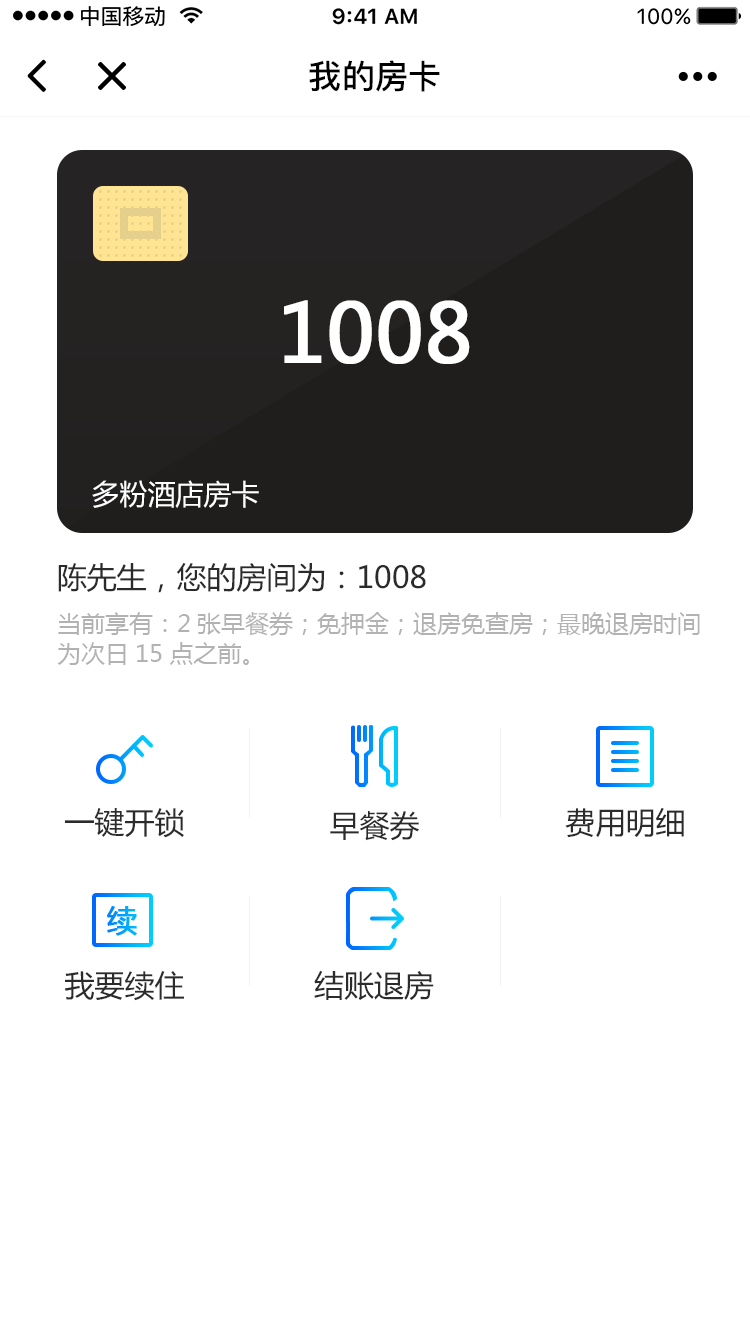
<style>
.page{position:relative;width:750px;height:1334px;background:#ffffff}
.page>*{position:absolute;margin:0}
.t1{font:33.2px "PingFang-SC-Bold";color:#000000}
.t2{font:80px "MicrosoftYaHei";color:#ffffff;font-weight:bold}
.t3{font:28px "MicrosoftYaHei";color:#ffffff}
.t4{font:30px "MicrosoftYaHei";color:#2b2b2b}
.t5{font:24px/30px "MicrosoftYaHei";color:#b2b2b2}
</style>
<div class="page">
<p class="t1" style="left:309px;top:60px;width:131px;height:32px">我的房卡</p>
<p class="t2" style="left:284px;top:300px;width:186px;height:64px">1008</p>
<p class="t3" style="left:92px;top:480px;width:167px;height:28px">多粉酒店房卡</p>
<p class="t4" style="left:58px;top:563px;width:368px;height:30px">陈先生，您的房间为：1008</p>
<p class="t5" style="left:57px;top:612px;width:643px;height:53px">当前享有：2张早餐券；免押金；退房免查房；最晚退房时间<br>为次日15点之前。</p>
<p class="t4" style="left:65px;top:808px;width:119px;height:30px">一键开锁</p>
<p class="t4" style="left:565px;top:807px;width:119px;height:31px">费用明细</p>
<p class="t4" style="left:330px;top:811px;width:89px;height:30px">早餐券</p>
<p class="t4" style="left:64px;top:971px;width:120px;height:30px">我要续住</p>
<p class="t4" style="left:314px;top:970px;width:120px;height:30px">结账退房</p>
</div>
